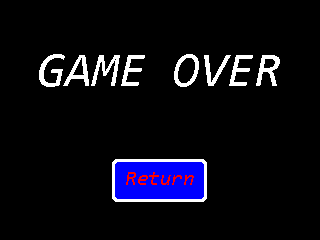
<style>
.page{position:relative;width:320px;height:240px;background:#000000}
.page>*{position:absolute;margin:0}
.t1{font:49.3px "Consolas-Italic";color:#ffffff}
.t2{font:21.3px "Consolas-Italic";color:#ff0000}
</style>
<div class="page">
<p class="t1" style="left:39px;top:54px;width:241px;height:33px">GAME OVER</p>
<p class="t2" style="left:126px;top:172px;width:68px;height:13px">Return</p>
</div>
